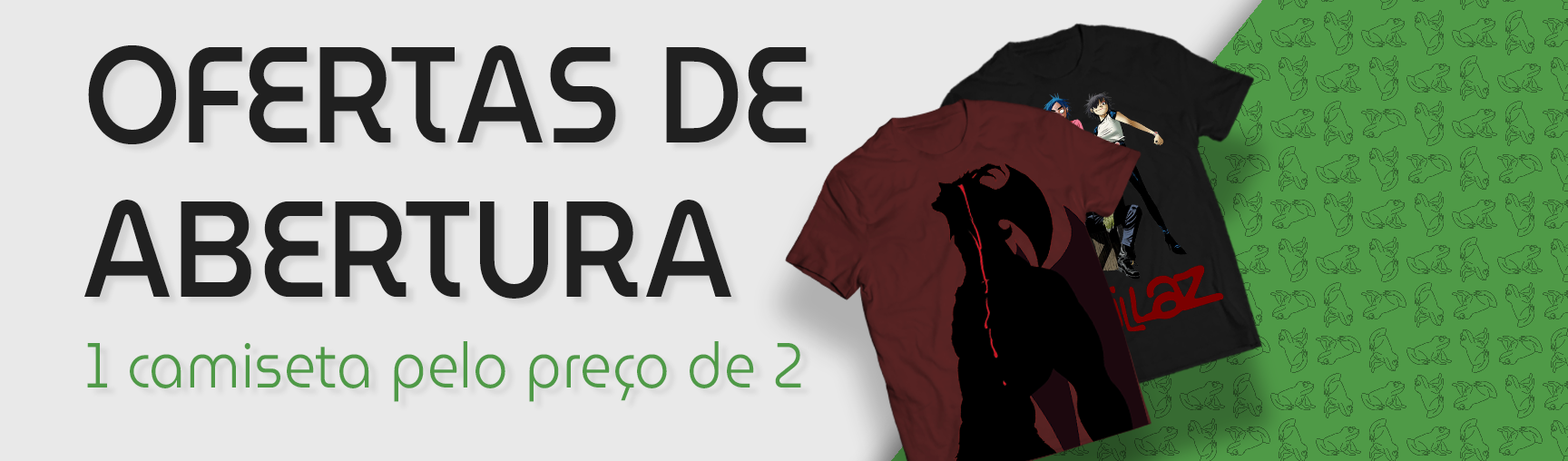
<style>
.page{position:relative;width:1568px;height:461px;background:#e9e9e9}
.page>*{position:absolute;margin:0}
.t1{font:63.5px/90.7px "MuseoModerno-Light";letter-spacing:0.025em;color:#4f9a47;scale:0.88 1}
.t2{font:136.1px/154.3px "MuseoModerno-Medium";letter-spacing:0.025em;color:#202020;scale:0.88 1}
</style>
<div class="page">
<p class="t1" style="left:84px;top:45px;width:723px;height:357px"><span class="t2">OFERTAS DE ABERTURA<br></span>1 camiseta pelo preço de 2</p>
</div>
